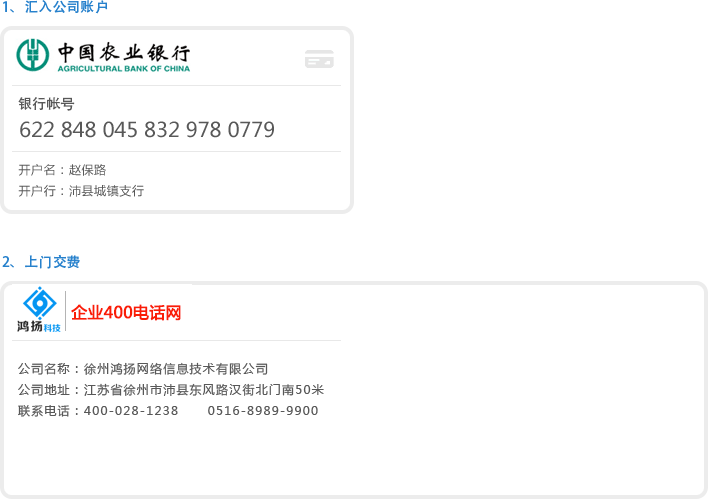
<style>
.page{position:relative;width:708px;height:499px;background:#ffffff}
.page>*{position:absolute;margin:0}
.t1{font:20.3px "MicrosoftYaHei";color:#585858}
.t2{font:12px "MicrosoftYaHei";letter-spacing:0.05em;color:#585858}
.t3{font:12px "MicrosoftYaHei";letter-spacing:0.1em;color:#585858}
</style>
<div class="page">
<p class="t1" style="left:20px;top:121px;width:254px;height:17px">622 848 045 832 978 0779</p>
<p class="t2" style="left:18px;top:164px;width:126px;height:33px;text-align:justify">开户名：赵保路<br>开户行：沛县城镇支行</p>
<p class="t3" style="left:18px;top:362px;width:306px;height:55px">公司名称：徐州鸿扬网络信息技术有限公司<br>公司地址：江苏省徐州市沛县东风路汉街北门南50米<br>联系电话：400-028-1238      0516-8989-9900</p>
</div>
